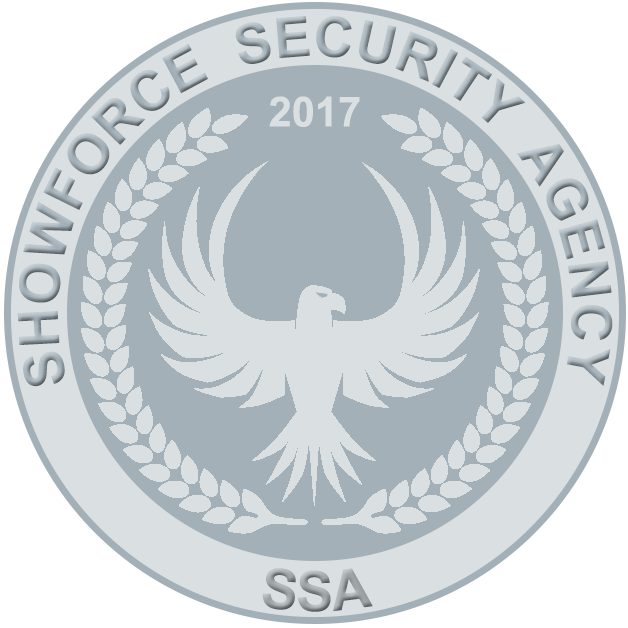
<style>
.page{position:relative;width:628px;height:628px;background:#dadfe2}
.page>*{position:absolute;margin:0}
.t1{font:55.6px "Arial-BoldMT"}
.t2{font:41.7px "Arial-BoldMT";color:#dadfe2}
.t3{font:55.6px "Arial-BoldMT";color:#9ea5a8}
</style>
<div class="page">
<p class="t1" style="left:17px;top:15px;width:596px;height:372px;text-align:center">SHOWFORCE  SECURITY  AGENCY</p>
<p class="t2" style="left:269px;top:96px;width:91px;height:31px">2017</p>
<p class="t3" style="left:262px;top:568px;width:111px;height:44px">SSA</p>
</div>
